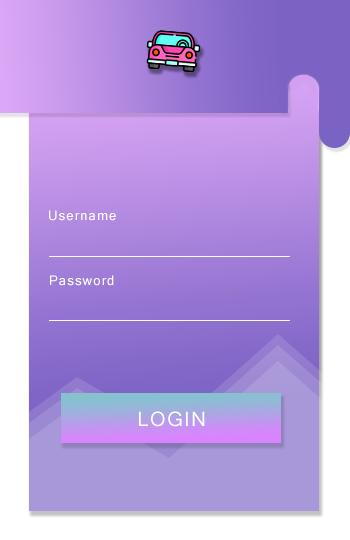
<style>
.page{position:relative;width:350px;height:540px}
.page>*{position:absolute;margin:0}
.t1{font:13.3px "MicrosoftSansSerif";letter-spacing:0.075em;color:#ffffff}
.t2{font:20px "MicrosoftSansSerif";letter-spacing:0.075em;color:#ffffff}
</style>
<div class="page">
<p class="t1" style="left:49px;top:210px;width:67px;height:11px">Username</p>
<p class="t1" style="left:50px;top:275px;width:64px;height:11px">Password</p>
<p class="t2" style="left:139px;top:411px;width:66px;height:16px">LOGIN</p>
</div>
